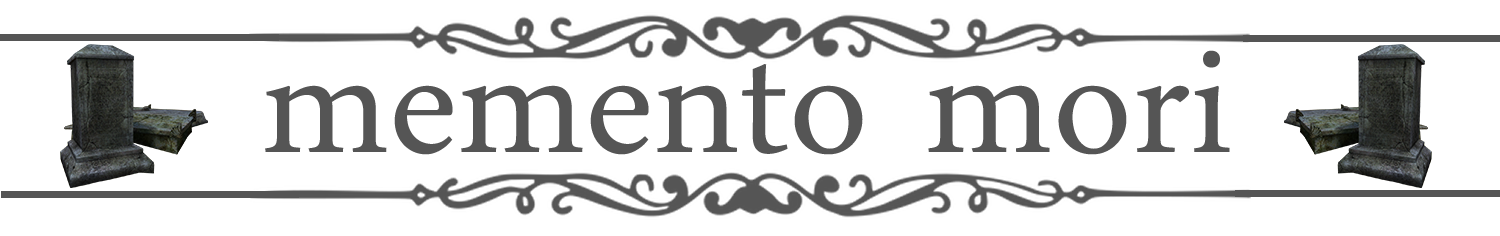
<style>
.page{position:relative;width:1500px;height:236px;background:#ffffff}
.page>*{position:absolute;margin:0}
.t1{font:229.2px "DaunPenh";color:#555555}
</style>
<div class="page">
<p class="t1" style="left:265px;top:50px;width:965px;height:105px">memento mori</p>
</div>
